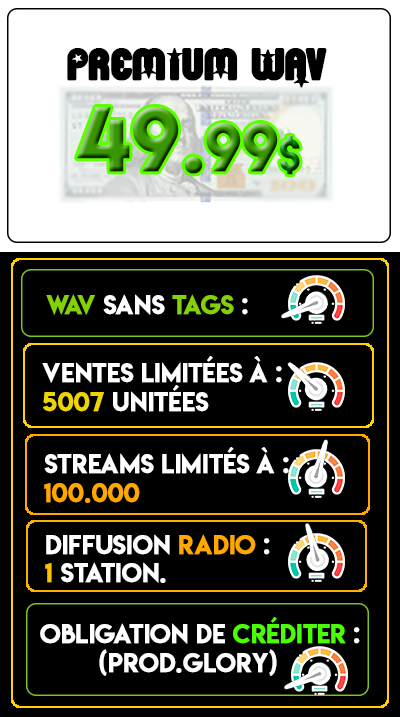
<style>
.page{position:relative;width:400px;height:717px;background:#000000}
.page>*{position:absolute;margin:0}
.t1{font:48px "Pornstar";color:#000000;text-transform:uppercase;font-weight:bold}
.t2{font:80.4px "LemonMilk";text-transform:uppercase;font-weight:bold}
.t3{font:60.3px "LemonMilk";text-transform:uppercase;font-weight:bold}
.t4{font:40.2px "LemonMilk";text-transform:uppercase;font-weight:bold}
.t5{font:24px "LemonMilk";color:#ffffff;text-transform:uppercase;font-weight:bold}
.t6{font:24px "LemonMilk";color:#83d107;text-transform:uppercase;font-weight:bold}
.t7{font:24px "LemonMilk";color:#edd405;text-transform:uppercase;font-weight:bold}
.t8{font:24px "LemonMilk";color:#fda700;text-transform:uppercase;font-weight:bold}
.t9{font:24px "LemonMilk";color:#ffa800;text-transform:uppercase;font-weight:bold}
.t10{font:24px "LemonMilk";color:#ffc000;text-transform:uppercase;font-weight:bold}
.t11{font:24px "LemonMilk";color:#4aff03;text-transform:uppercase;font-weight:bold}
</style>
<div class="page">
<p class="t1" style="left:67px;top:48px;width:260px;height:40px">premium wav</p>
<p class="t2" style="left:77px;top:107px;width:223px;height:68px">49.<span class="t3">99</span><span class="t4">$</span></p>
<p class="t5" style="left:46px;top:294px;width:202px;height:21px"><span class="t6">wav</span> sans <span class="t6">tags</span> :</p>
<p class="t5" style="left:42px;top:356px;width:240px;height:56px">ventes limitées à : <br><span class="t7">5007</span> unitées</p>
<p class="t5" style="left:44px;top:447px;width:245px;height:56px">streams limités à : <br><span class="t8">100.000</span></p>
<p class="t5" style="left:45px;top:534px;width:225px;height:49px">diffusion <span class="t9">radio</span> : <br><span class="t10">1</span> station.</p>
<p class="t5" style="left:40px;top:617px;width:320px;height:59px">obligation de <span class="t11">créditer</span> :<br>        (prod.glory)</p>
</div>
